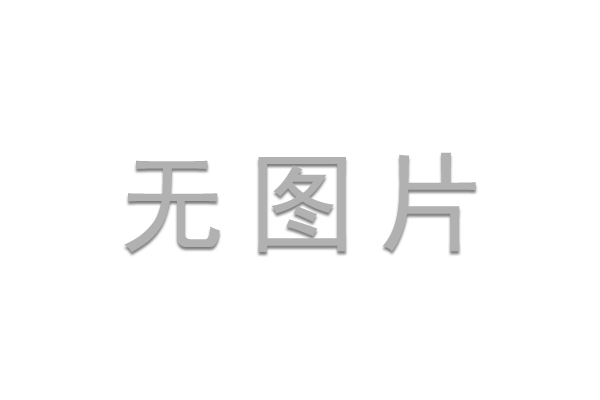
<style>
.page{position:relative;width:600px;height:400px;background:#ffffff}
.page>*{position:absolute;margin:0}
.t1{font:108px "SimHei";letter-spacing:0.2em;color:#b1b1b1}
</style>
<div class="page">
<p class="t1" style="left:124px;top:152px;width:352px;height:100px">无图片</p>
</div>
